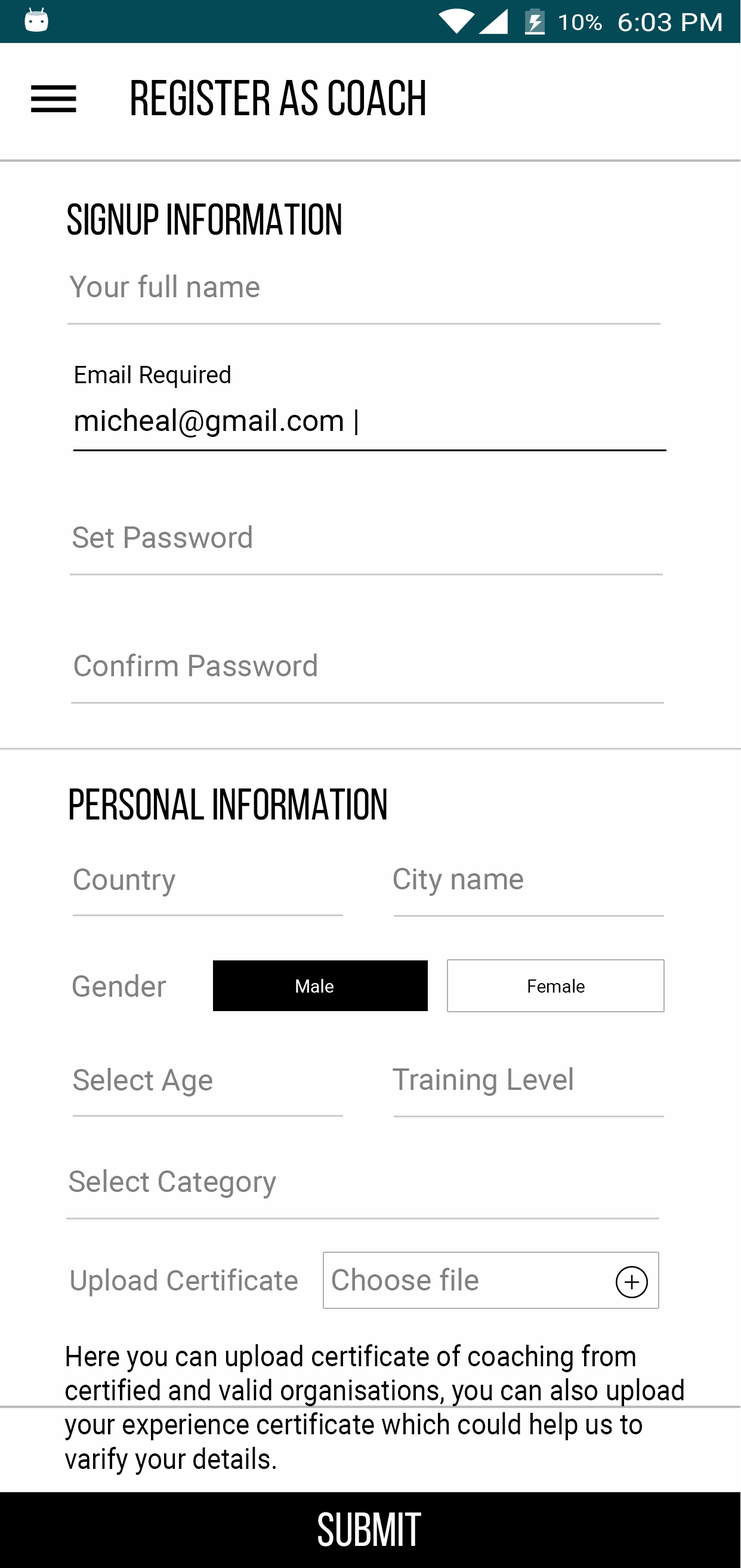
<style>
.page{position:relative;width:741px;height:1568px;background:#fefefe}
.page>*{position:absolute;margin:0}
.t1{font:50.7px "BebasNeueRegular";color:#010101}
.t2{font:44.8px "BebasNeueRegular";color:#010101}
.t3{font:29.8px "Roboto-Regular";color:#828181}
.t4{font:23.9px "Roboto-Regular";color:#000000}
.t5{font:29.8px "Roboto-Regular";color:#000000}
.t6{font:17.9px "Roboto-Regular";color:#fdfcfc}
.t7{font:17.9px "Roboto-Regular";color:#000000}
.t8{font:28.7px "Roboto-Regular";color:#828181}
.t9{font:28.5px "Roboto-Regular";color:#000000;scale:0.93 1}
.t10{font:47.8px "BebasNeueRegular";color:#fefdfd}
</style>
<div class="page">
<p class="t1" style="left:131px;top:79px;width:295px;height:37px">REGISTER AS COACH</p>
<p class="t2" style="left:67px;top:203px;width:274px;height:32px">SIGNUP INFORMATION</p>
<p class="t3" style="left:69px;top:275px;width:191px;height:22px">Your full name</p>
<p class="t4" style="left:75px;top:365px;width:155px;height:23px">Email Required</p>
<p class="t5" style="left:75px;top:408px;width:283px;height:30px">micheal@gmail.com |</p>
<p class="t3" style="left:73px;top:525px;width:179px;height:23px">Set Password</p>
<p class="t3" style="left:74px;top:654px;width:243px;height:22px">Confirm Password</p>
<p class="t2" style="left:70px;top:788px;width:317px;height:32px">PERSONAL INFORMATION</p>
<p class="t3" style="left:73px;top:868px;width:102px;height:29px">Country</p>
<p class="t3" style="left:393px;top:868px;width:130px;height:28px">City name</p>
<p class="t3" style="left:73px;top:974px;width:94px;height:23px">Gender</p>
<p class="t6" style="left:296px;top:979px;width:38px;height:14px">Male</p>
<p class="t7" style="left:528px;top:979px;width:57px;height:14px">Female</p>
<p class="t3" style="left:73px;top:1068px;width:139px;height:28px">Select Age</p>
<p class="t3" style="left:393px;top:1067px;width:180px;height:29px">Training Level</p>
<p class="t3" style="left:69px;top:1169px;width:207px;height:30px">Select Category</p>
<p class="t8" style="left:71px;top:1268px;width:227px;height:28px">Upload Certificate</p>
<p class="t3" style="left:332px;top:1268px;width:147px;height:22px">Choose file</p>
<p class="t9" style="left:64px;top:1344px;width:620px;height:131px">Here you can upload certificate of coaching from <br>certified and valid organisations, you can also upload<br>your experience certificate which could help us to<br>varify your details.</p>
<p class="t10" style="left:318px;top:1512px;width:103px;height:35px">SUBMIT</p>
</div>
